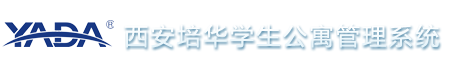
<style>
.page{position:relative;width:450px;height:71px;background:#ffffff}
.page>*{position:absolute;margin:0}
.t1{font:24px "MicrosoftYaHei";letter-spacing:0.103em;color:#f3fafd}
</style>
<div class="page">
<p class="t1" style="left:124px;top:24px;width:315px;height:24px">西安培华学生公寓管理系统</p>
</div>
